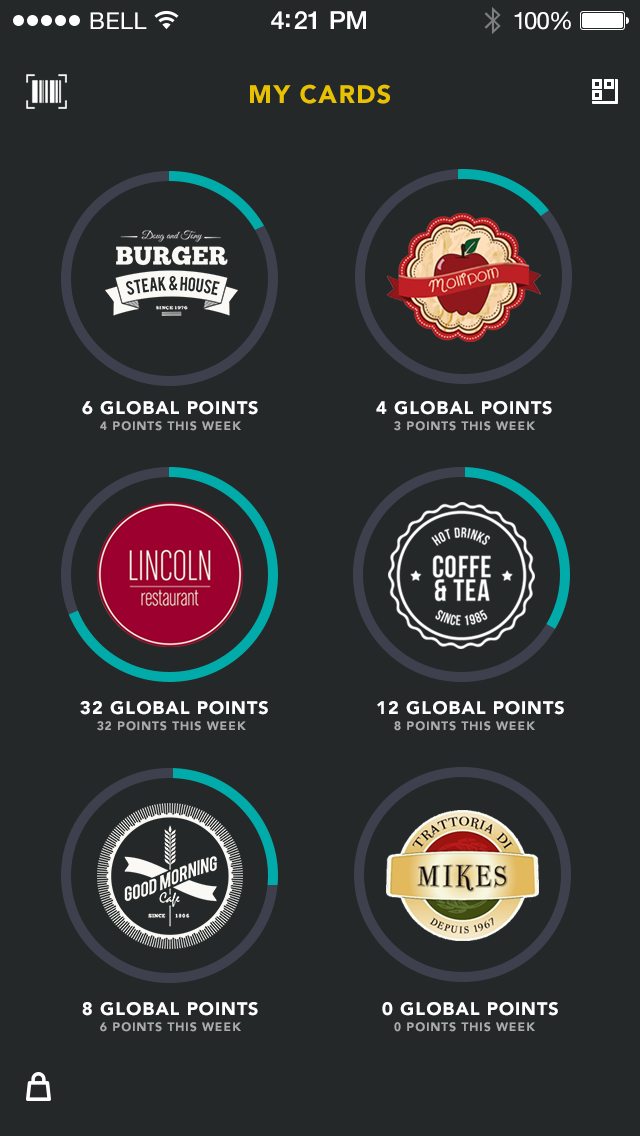
<style>
.page{position:relative;width:640px;height:1136px;background:#252829}
.page>*{position:absolute;margin:0}
.t1{font:23px "HelveticaNeue";letter-spacing:0.02em;color:#ffffff}
.t2{font:25px "HelveticaNeue-Medium";letter-spacing:-0.02em;color:#ffffff}
.t3{font:24px "HelveticaNeue";letter-spacing:-0.02em;color:#ffffff}
.t4{font:25px "Avenir-Black";letter-spacing:0.06em;color:#e8c103}
.t5{font:18px "Avenir-Black";letter-spacing:0.06em;color:#ffffff}
.t6{font:12px "Avenir-Black";letter-spacing:0.06em;color:#aaabab}
</style>
<div class="page">
<p class="t1" style="left:90px;top:12px;width:57px;height:17px">BELL</p>
<p class="t2" style="left:271px;top:11px;width:95px;height:18px">4:21 PM</p>
<p class="t3" style="left:514px;top:11px;width:57px;height:19px">100%</p>
<p class="t4" style="left:250px;top:84px;width:140px;height:20px">MY CARDS</p>
<p class="t5" style="left:82px;top:401px;width:176px;height:14px">6 GLOBAL POINTS</p>
<p class="t5" style="left:376px;top:401px;width:176px;height:14px">4 GLOBAL POINTS</p>
<p class="t6" style="left:100px;top:421px;width:141px;height:10px">4 POINTS THIS WEEK</p>
<p class="t6" style="left:394px;top:421px;width:141px;height:10px">3 POINTS THIS WEEK</p>
<p class="t5" style="left:80px;top:701px;width:188px;height:14px">32 GLOBAL POINTS</p>
<p class="t5" style="left:377px;top:701px;width:187px;height:14px">12 GLOBAL POINTS</p>
<p class="t6" style="left:97px;top:721px;width:149px;height:10px">32 POINTS THIS WEEK</p>
<p class="t6" style="left:394px;top:721px;width:141px;height:10px">8 POINTS THIS WEEK</p>
<p class="t5" style="left:82px;top:1002px;width:176px;height:14px">8 GLOBAL POINTS</p>
<p class="t5" style="left:382px;top:1002px;width:176px;height:14px">0 GLOBAL POINTS</p>
<p class="t6" style="left:100px;top:1022px;width:141px;height:10px">6 POINTS THIS WEEK</p>
<p class="t6" style="left:394px;top:1022px;width:141px;height:10px">0 POINTS THIS WEEK</p>
</div>
